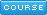
<style>
.page{position:relative;width:47px;height:15px}
.page>*{position:absolute;margin:0}
.t1{font:10px "Victor'sPixelFont";color:#ffffff}
</style>
<div class="page">
<p class="t1" style="left:4px;top:5px;width:39px;height:5px">course</p>
</div>
